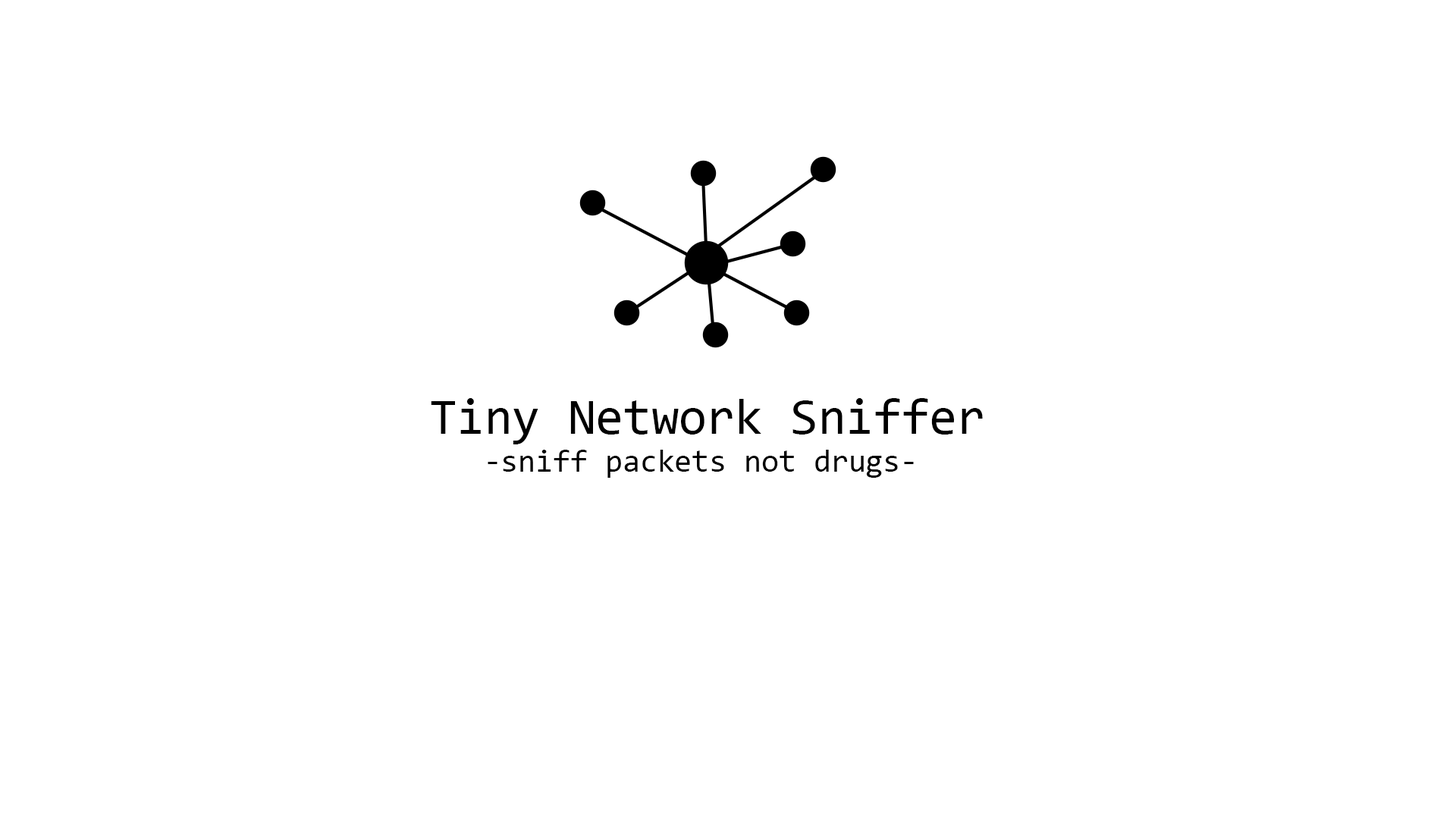
<style>
.page{position:relative;width:1456px;height:819px;background:#ffffff}
.page>*{position:absolute;margin:0}
.t1{font:31.6px "Consolas";color:#000000}
.t2{font:50.6px "Consolas";color:#000000}
</style>
<div class="page">
<p class="t1" style="left:431px;top:398px;width:552px;height:80px"><span class="t2">   Tiny Network Sniffer<br></span>     -sniff packets not drugs-</p>
</div>
